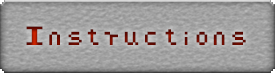
<style>
.page{position:relative;width:275px;height:73px}
.page>*{position:absolute;margin:0}
.t1{font:21px "Nintendo-NES-Font";letter-spacing:-0.08em;color:#640a00}
.t2{font:21px "Nintendo-NES-Font";letter-spacing:0.08em;color:#640a00}
.t3{font:21px "Nintendo-NES-Font";letter-spacing:-0.2em;color:#640a00}
.t4{font:21px "Nintendo-NES-Font";letter-spacing:-0.04em;color:#640a00}
.t5{font:21px "Nintendo-NES-Font";letter-spacing:-0.02em;color:#640a00}
.t6{font:21px "Nintendo-NES-Font";letter-spacing:-0.34em;color:#640a00}
.t7{font:21px "Nintendo-NES-Font";letter-spacing:-0.18em;color:#640a00}
.t8{font:21px "Nintendo-NES-Font";letter-spacing:-0.12em;color:#640a00}
</style>
<div class="page">
<p class="t1" style="left:26px;top:26px;width:220px;height:19px"><span class="t2">I</span>ns<span class="t3">t</span><span class="t4">ru</span><span class="t5">c</span><span class="t6">t</span><span class="t7">io</span><span class="t8">ns</span></p>
</div>
